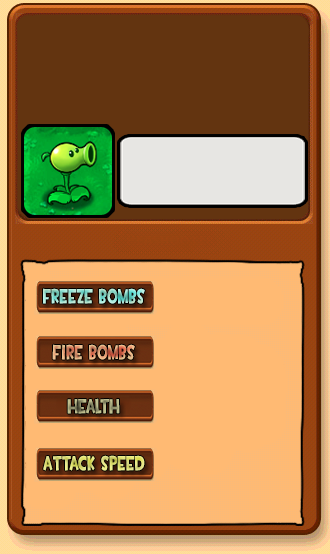
<style>
.page{position:relative;width:330px;height:554px;background:#ffba73}
.page>*{position:absolute;margin:0}
.t1{font:20.4px "TF2Build";letter-spacing:0.025em;scale:0.66 1}
</style>
<div class="page">
<p class="t1" style="left:42px;top:288px;width:103px;height:16px">Freeze Bombs</p>
<p class="t1" style="left:52px;top:344px;width:83px;height:16px">Fire Bombs</p>
<p class="t1" style="left:67px;top:398px;width:53px;height:16px">Health</p>
<p class="t1" style="left:43px;top:455px;width:102px;height:16px">Attack Speed</p>
</div>
